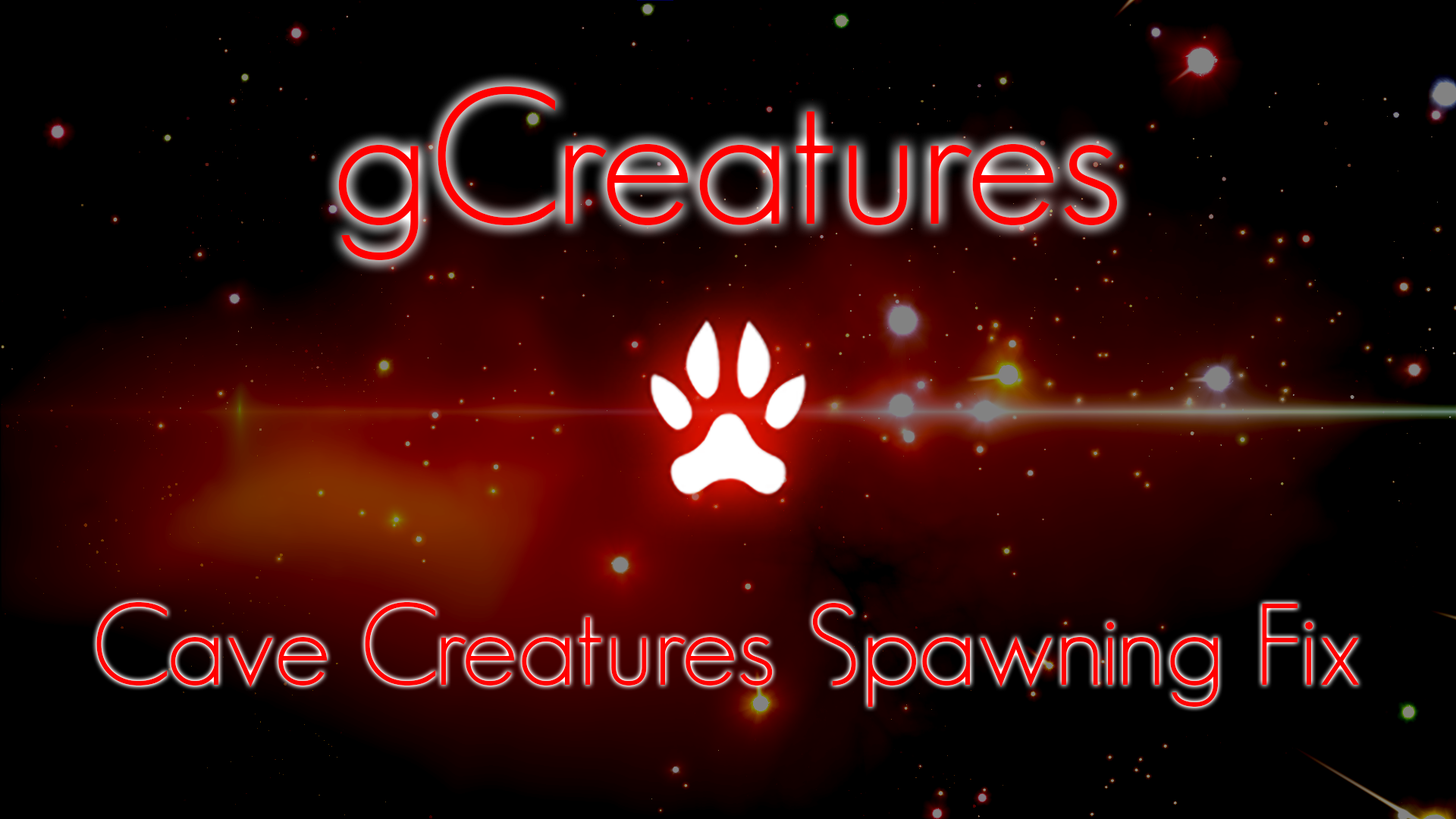
<style>
.page{position:relative;width:1456px;height:819px;background:#000000}
.page>*{position:absolute;margin:0}
.t1{font:189.6px "GeosansLight-NMS";color:#ff0000}
.t2{font:113.7px "GeosansLight-NMS";color:#ff0000}
</style>
<div class="page">
<p class="t1" style="left:338px;top:86px;width:780px;height:174px">gCreatures</p>
<p class="t2" style="left:96px;top:602px;width:1264px;height:105px">Cave Creatures Spawning Fix</p>
</div>
